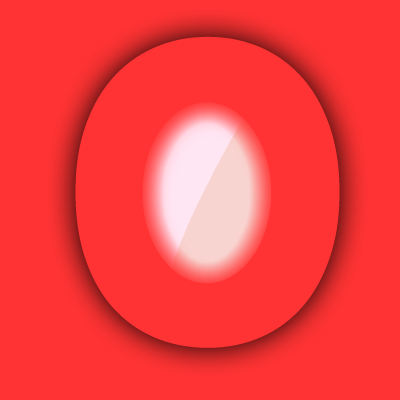
<style>
.page{position:relative;width:400px;height:400px;background:#ff3333}
.page>*{position:absolute;margin:0}
.t1{font:483.3px "BalooBhai";color:#ff3333;text-transform:uppercase;scale:0.86 1}
</style>
<div class="page">
<p class="t1" style="left:75px;top:36px;width:265px;height:312px;rotate:-180deg">o</p>
</div>
